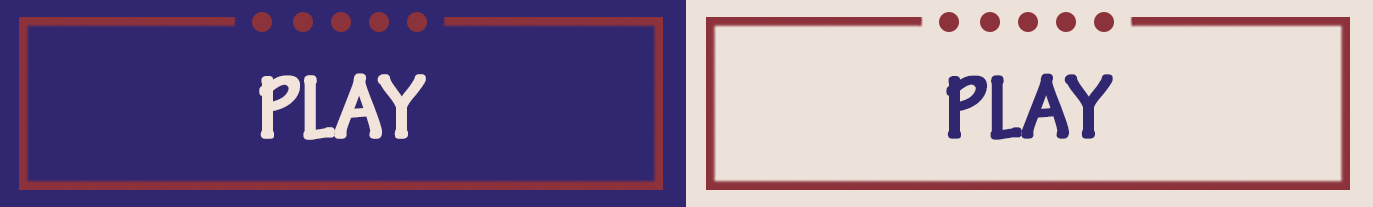
<style>
.page{position:relative;width:1373px;height:207px;background:#312770}
.page>*{position:absolute;margin:0}
.t1{font:95.6px "TektonPro-BoldCond";letter-spacing:-0.02em;color:#f2e3db;font-weight:bold}
.t2{font:95.6px "TektonPro-BoldCond";letter-spacing:-0.02em;color:#312770;font-weight:bold}
</style>
<div class="page">
<p class="t1" style="left:259px;top:73px;width:167px;height:67px">PLAY</p>
<p class="t2" style="left:946px;top:73px;width:167px;height:67px">PLAY</p>
</div>
